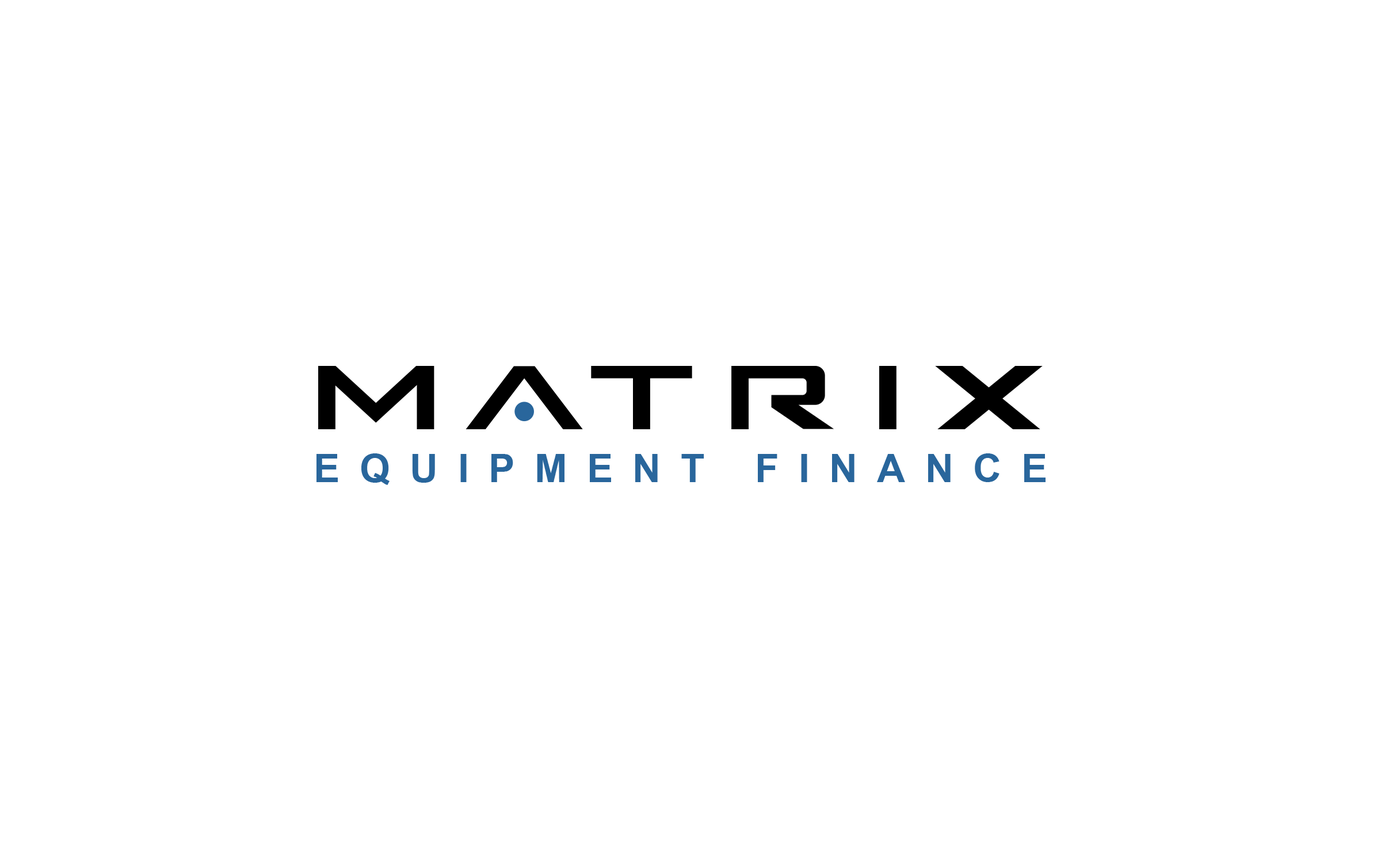
<style>
.page{position:relative;width:1381px;height:863px;background:#ffffff}
.page>*{position:absolute;margin:0}
.t1{font:39.3px "Arial-BoldMT";letter-spacing:0.5em;color:#29669c}
</style>
<div class="page">
<p class="t1" style="left:317px;top:454px;width:729px;height:31px">EQUIPMENT FINANCE</p>
</div>
